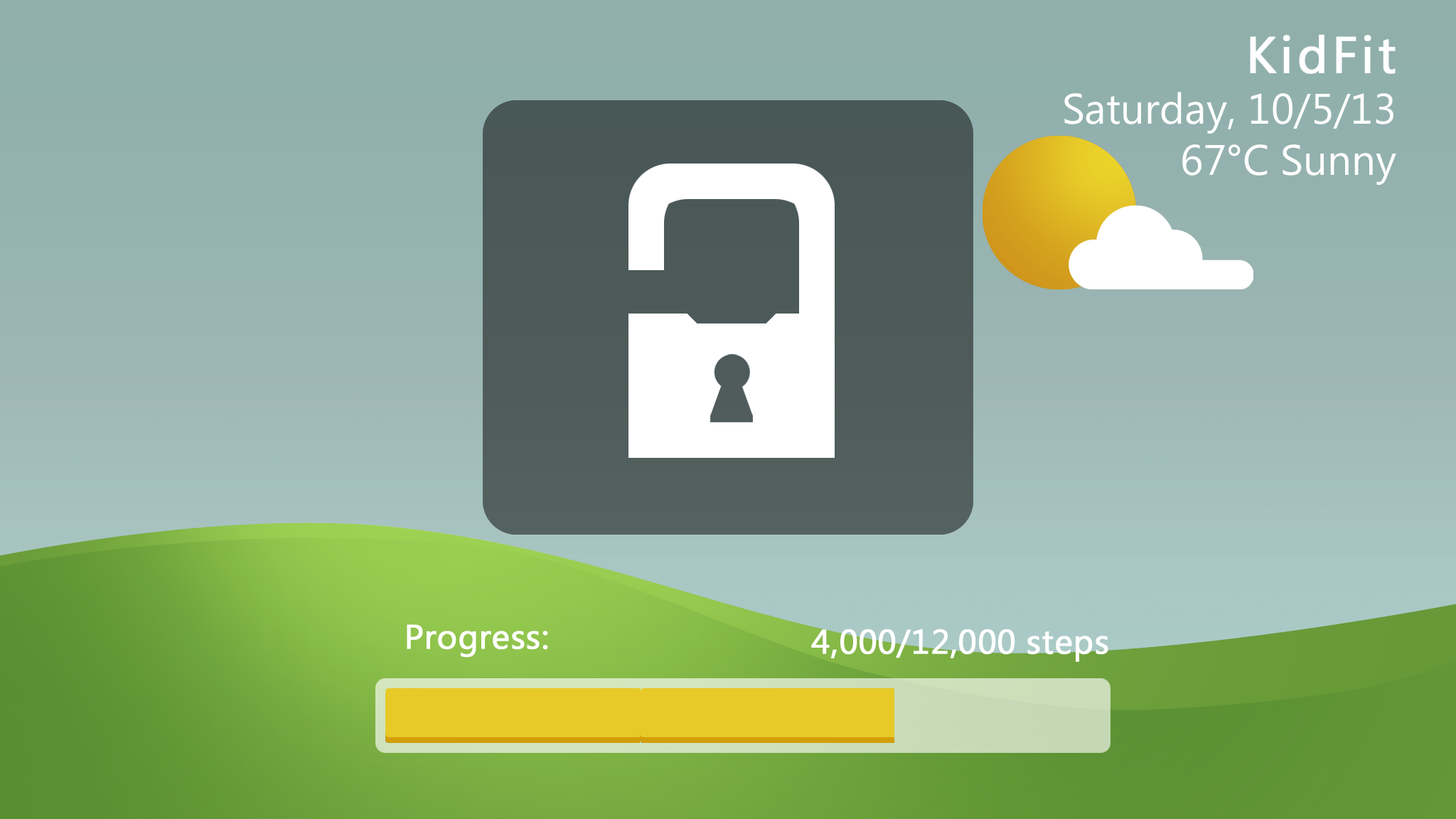
<style>
.page{position:relative;width:1456px;height:819px}
.page>*{position:absolute;margin:0}
.t1{font:42.7px "SegoeUISymbol";color:#ffffff}
.t2{font:51.2px "SegoeUISymbol";letter-spacing:0.06em;color:#ffffff;font-weight:bold}
</style>
<div class="page">
<p class="t1" style="left:1064px;top:34px;width:332px;height:151px;text-align:right"><span class="t2">KidFit<br></span>Saturday, 10/5/13<br>67°C Sunny</p>
</div>
